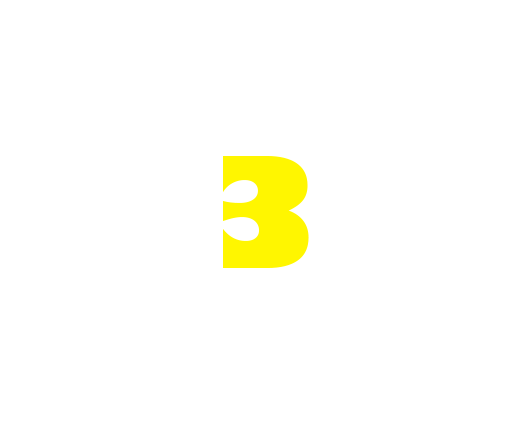
<style>
.page{position:relative;width:512px;height:425px;background:#ffffff}
.page>*{position:absolute;margin:0}
.t1{font:150px "GillSansNova-UltraBold";letter-spacing:-0.05em;color:#fff600}
</style>
<div class="page">
<p class="t1" style="left:223px;top:156px;width:86px;height:112px">3</p>
</div>
